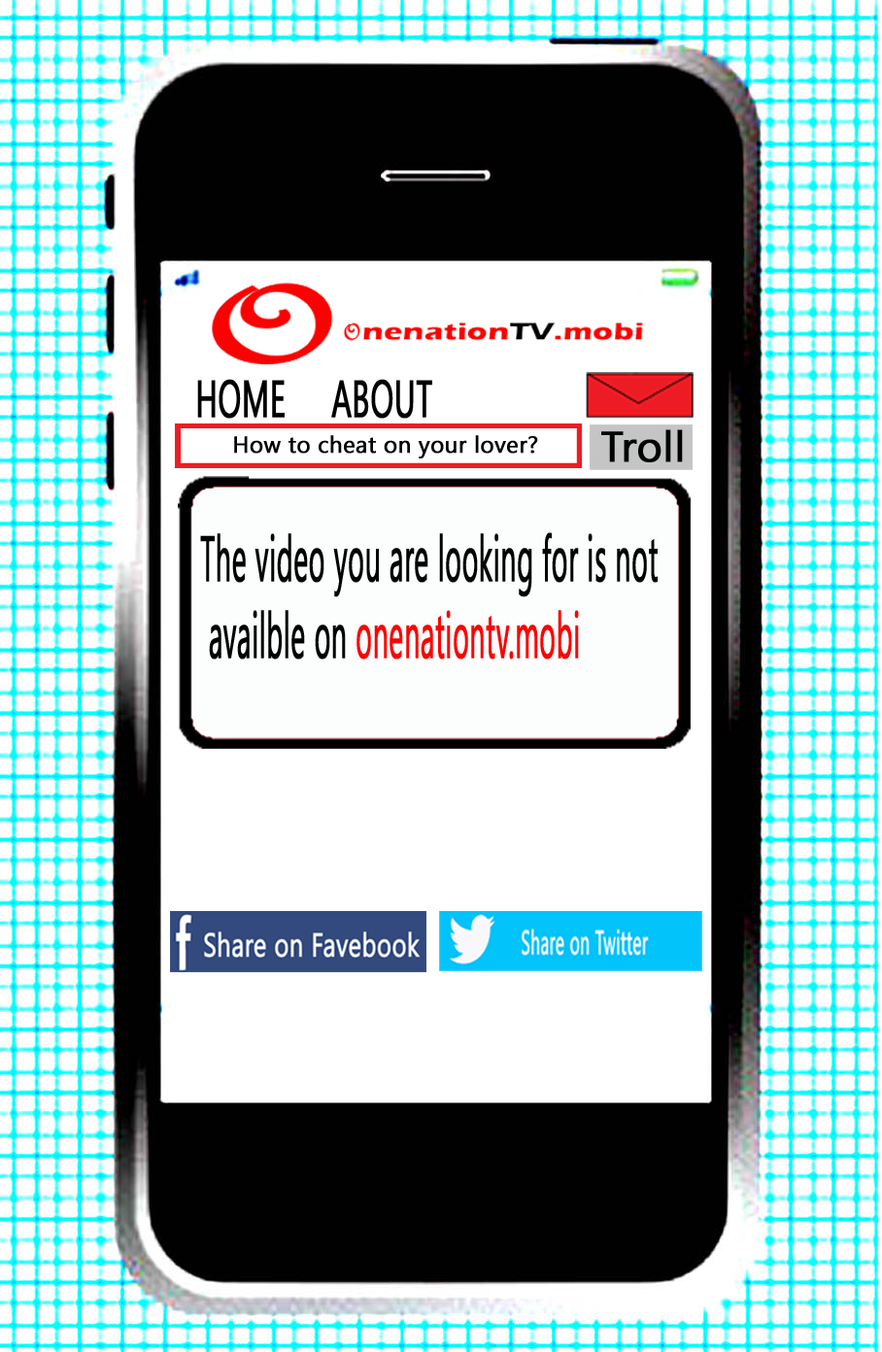
<style>
.page{position:relative;width:882px;height:1352px;background:#ffffff}
.page>*{position:absolute;margin:0}
.t1{font:51.9px "KhmerUI";color:#000101;font-weight:bold;scale:0.59 1}
.t2{font:23.2px "KhmerUI";color:#000202;font-weight:bold}
.t3{font:42.6px "KhmerUI";color:#000303;font-weight:bold}
.t4{font:64px "KhmerUI";color:#000202;font-weight:bold;scale:0.43 1}
.t5{font:64px "KhmerUI";color:#f90505;font-weight:bold;scale:0.43 1}
</style>
<div class="page">
<p class="t1" style="left:197px;top:379px;width:235px;height:40px">HOME     ABOUT</p>
<p class="t2" style="left:234px;top:435px;width:304px;height:23px">How to cheat on your lover?</p>
<p class="t3" style="left:601px;top:429px;width:82px;height:33px">Troll</p>
<p class="t4" style="left:200px;top:532px;width:458px;height:128px">The video you are looking for is not <br> availble on <span class="t5">onenationtv.mobi</span></p>
</div>
